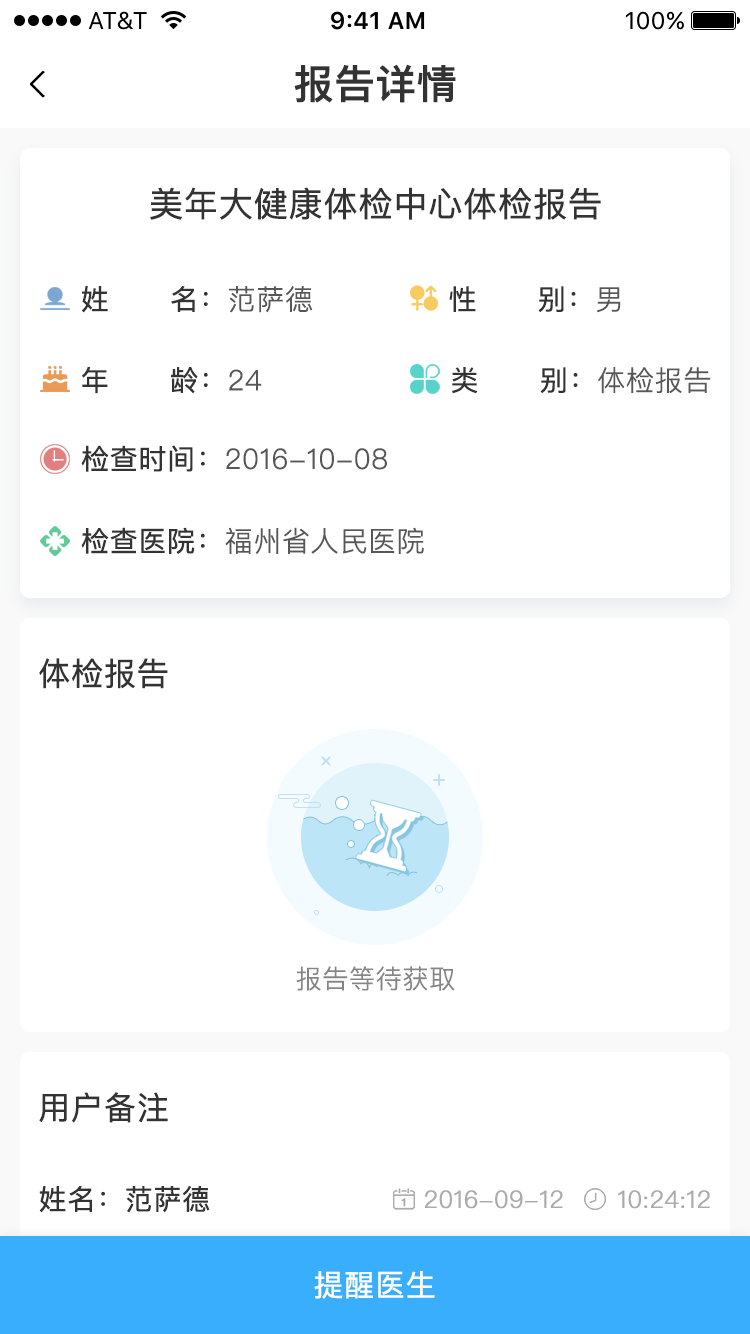
<style>
.page{position:relative;width:750px;height:1334px;background:#ffffff}
.page>*{position:absolute;margin:0}
.t1{font:40px "PingFangSC-Medium";color:#333333;font-weight:bold}
.t2{font:34px "PingFangSC-Regular";color:#333333;font-weight:bold}
.t3{font:28px "PingFangSC-Regular";color:#333333;font-weight:bold}
.t4{font:28px "PingFangSC-Light";color:#575757;font-weight:bold}
.t5{font:32px "PingFangSC-Regular";color:#333333;font-weight:bold}
.t6{font:26px "PingFangSC-Light";color:#858585;font-weight:bold}
.t7{font:24.1px "PingFangSC-Light";color:#ababab;font-weight:bold}
.t8{font:30px "PingFangSC-Regular";color:#ffffff;font-weight:bold}
</style>
<div class="page">
<p class="t1" style="left:294px;top:64px;width:162px;height:39px">报告详情</p>
<p class="t2" style="left:150px;top:187px;width:451px;height:33px">美年大健康体检中心体检报告</p>
<p class="t3" style="left:82px;top:286px;width:231px;height:27px">姓      名：<span class="t4">范萨德</span></p>
<p class="t3" style="left:449px;top:286px;width:172px;height:27px">性      别：<span class="t4">男</span></p>
<p class="t3" style="left:82px;top:366px;width:180px;height:28px">年      龄：<span class="t4">24</span></p>
<p class="t3" style="left:452px;top:367px;width:259px;height:27px">类      别：<span class="t4">体检报告</span></p>
<p class="t4" style="left:81px;top:445px;width:306px;height:27px"><span class="t3">检查时间：</span>2016-10-08</p>
<p class="t4" style="left:81px;top:527px;width:343px;height:27px"><span class="t3">检查医院：</span>福州省人民医院</p>
<p class="t5" style="left:39px;top:658px;width:129px;height:31px">体检报告</p>
<p class="t6" style="left:296px;top:966px;width:159px;height:25px">报告等待获取</p>
<p class="t5" style="left:39px;top:1092px;width:129px;height:31px">用户备注</p>
<p class="t3" style="left:39px;top:1185px;width:171px;height:28px">姓名：范萨德</p>
<p class="t7" style="left:425px;top:1190px;width:138px;height:19px">2016-09-12</p>
<p class="t7" style="left:618px;top:1190px;width:92px;height:19px">10:24:12</p>
<p class="t8" style="left:314px;top:1271px;width:121px;height:28px">提醒医生</p>
</div>
